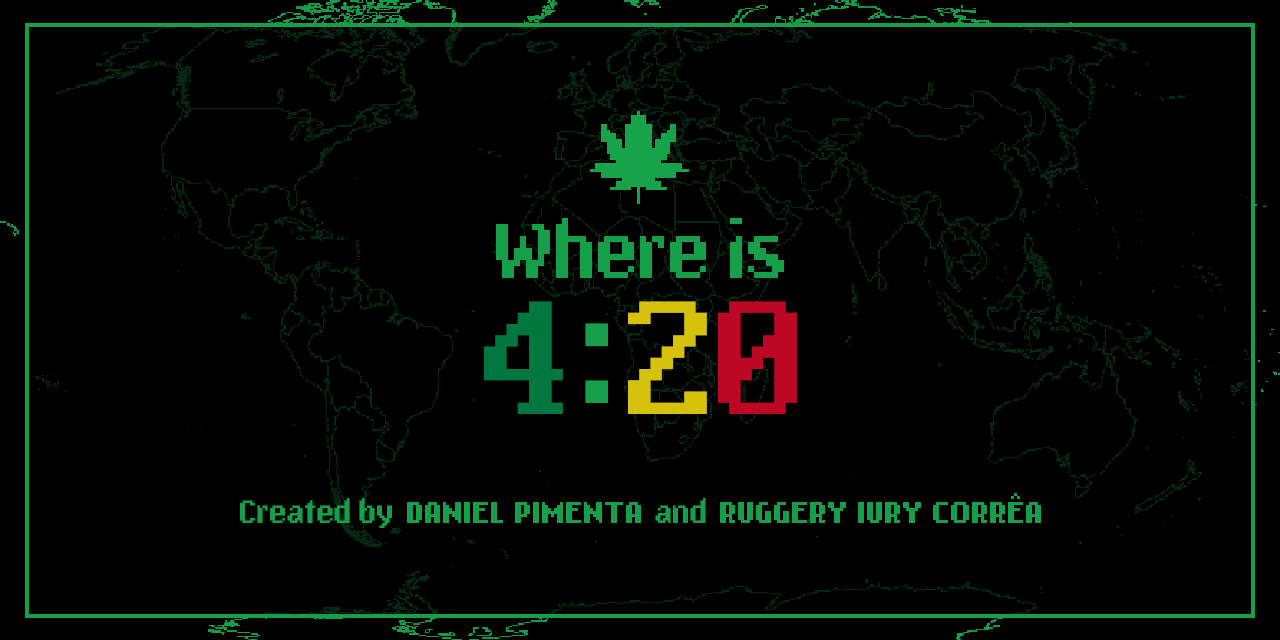
<style>
.page{position:relative;width:1280px;height:640px;background:#000000}
.page>*{position:absolute;margin:0}
.t1{font:72px "PixAntiqua";color:#159f48}
.t2{font:180px "ModernDOS8x16";letter-spacing:-0.12em;color:#00773e}
.t3{font:180px "ModernDOS8x16";letter-spacing:-0.08em;color:#159f48}
.t4{font:180px "ModernDOS8x16";color:#d6c20c}
.t5{font:180px "ModernDOS8x16";color:#bc0824}
.t6{font:48px "BitCell-Regular";color:#159f48}
.t7{font:30px "PixAntiqua";color:#159f48}
</style>
<div class="page">
<p class="t1" style="left:496px;top:218px;width:288px;height:60px">Where is</p>
<p class="t2" style="left:484px;top:301px;width:313px;height:113px">4<span class="t3">:</span><span class="t4">2</span><span class="t5">0</span></p>
<p class="t6" style="left:240px;top:493px;width:801px;height:35px"><span class="t7">Created by </span>DANIEL PIMENTA <span class="t7">and </span>RUGGERY IURY CORRÊA</p>
</div>
